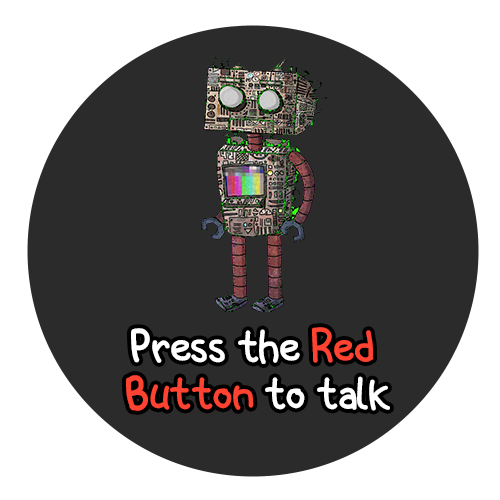
<style>
.page{position:relative;width:500px;height:500px;background:#2b2b2b}
.page>*{position:absolute;margin:0}
.t1{font:48.2px/47.1px "Spacekids";color:#ff4332}
.t2{font:48.2px/47.1px "Spacekids";color:#ffffff}
</style>
<div class="page">
<p class="t1" style="left:126px;top:327px;width:264px;height:84px;text-align:center"><span class="t2">Press the </span>Red <br>Button <span class="t2">to talk</span></p>
</div>
